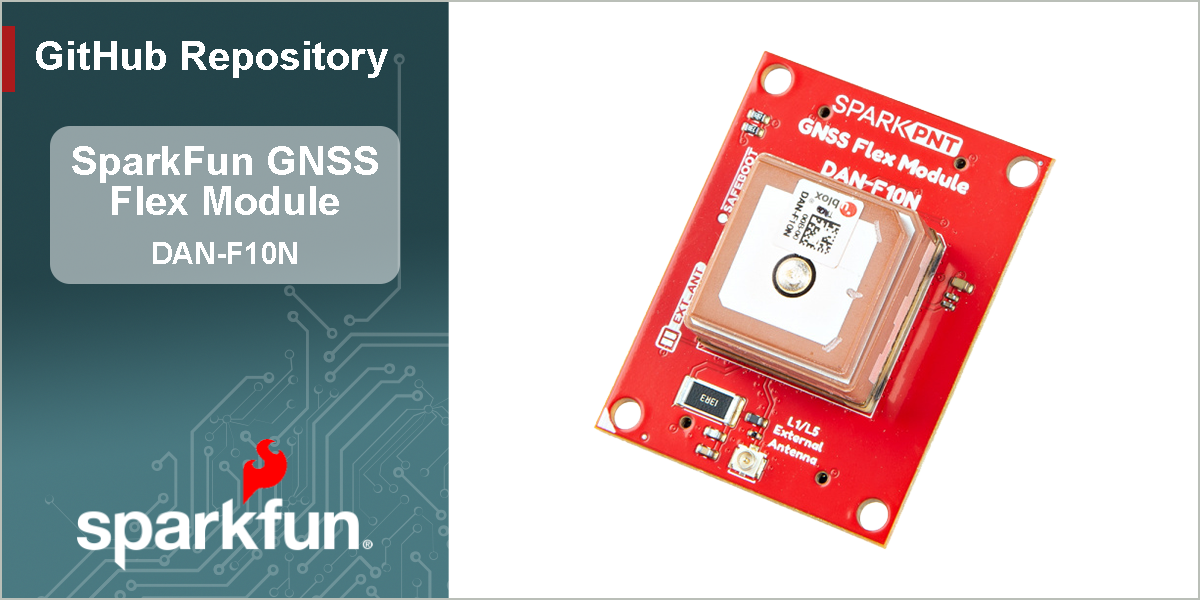
<style>
.page{position:relative;width:1200px;height:600px;background:#ffffff}
.page>*{position:absolute;margin:0}
.t1{font:40px "Arial-BoldMT";color:#ffffff}
.t2{font:30px "Arial-BoldMT";color:#ffffff}
</style>
<div class="page">
<p class="t1" style="left:36px;top:41px;width:352px;height:37px">GitHub Repository</p>
<p class="t1" style="left:72px;top:146px;width:306px;height:69px;text-align:center">SparkFun GNSS<br>Flex Module</p>
<p class="t2" style="left:153px;top:242px;width:144px;height:22px">DAN-F10N</p>
</div>
